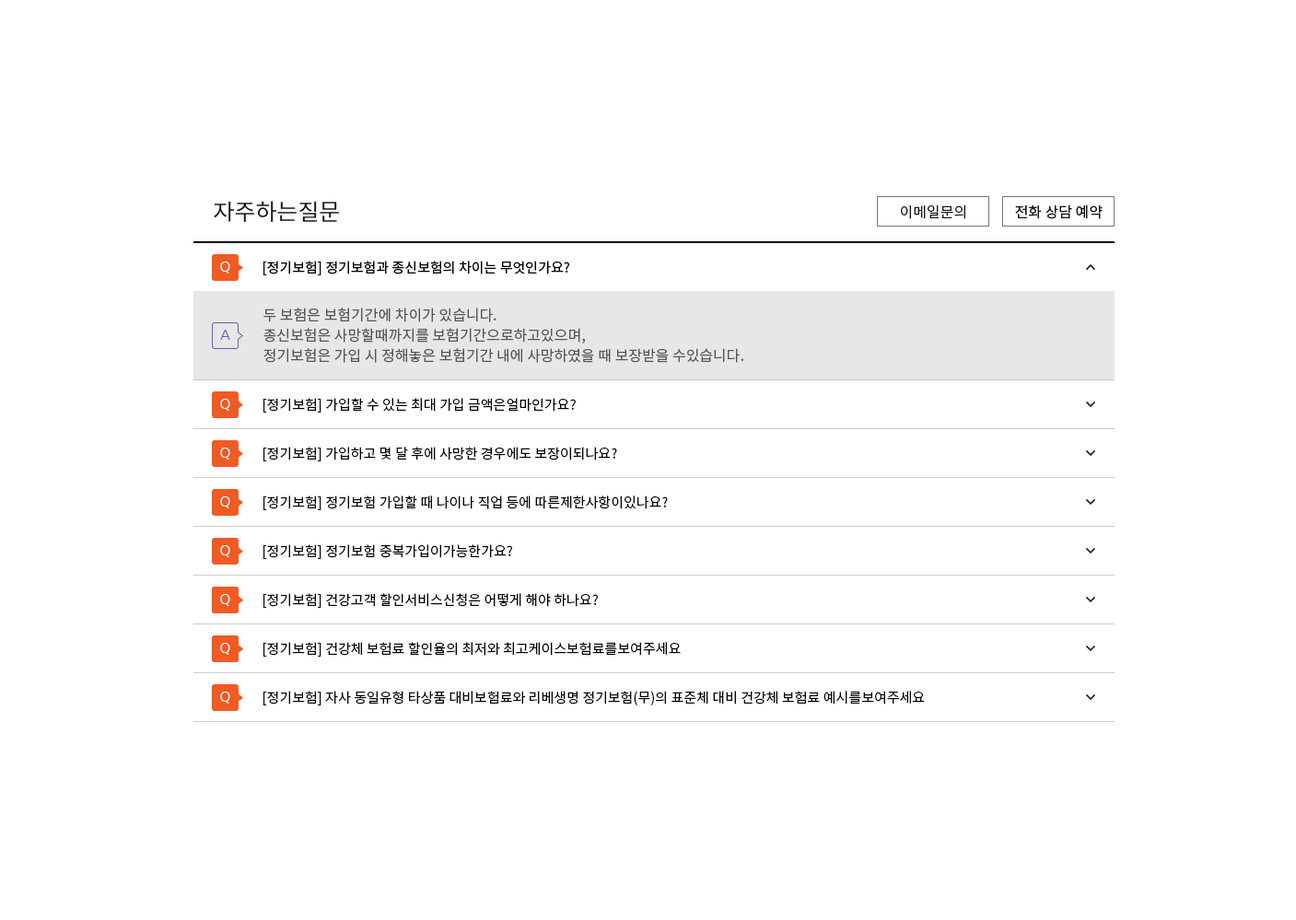
<style>
.page{position:relative;width:1296px;height:920px;background:#ffffff}
.page>*{position:absolute;margin:0}
.t1{font:23px "NotoSansKR-Regular";color:#121314}
.t2{font:14.7px "NotoSansKR-Regular";color:#121314}
.t3{font:13.8px "NanumGothic";color:#ffffff;text-transform:uppercase}
.t4{font:13.8px "NotoSansKR-Regular";color:#000000}
.t5{font:14.7px/20.3px "NotoSansKR-Regular";color:#555555}
.t6{font:13.8px "NanumGothic";color:#6b5bba;text-transform:uppercase}
.t7{font:13.8px/48.8px "NotoSansKR-Regular";color:#000000}
</style>
<div class="page">
<p class="t1" style="left:214px;top:201px;width:125px;height:21px">자주하는질문</p>
<p class="t2" style="left:901px;top:204px;width:64px;height:15px">이메일문의</p>
<p class="t2" style="left:1015px;top:204px;width:88px;height:15px">전화 상담 예약</p>
<p class="t3" style="left:220px;top:262px;width:10px;height:12px">q</p>
<p class="t4" style="left:263px;top:261px;width:306px;height:14px">[정기보험] 정기보험과 종신보험의 차이는 무엇인가요?</p>
<p class="t5" style="left:263px;top:308px;width:480px;height:55px">두 보험은 보험기간에 차이가 있습니다.<br>종신보험은 사망할때까지를 보험기간으로하고있으며,<br>정기보험은 가입 시 정해놓은 보험기간 내에 사망하였을 때 보장받을 수있습니다.</p>
<p class="t6" style="left:220px;top:330px;width:10px;height:10px">A</p>
<p class="t7" style="left:263px;top:398px;width:662px;height:308px">[정기보험] 가입할 수 있는 최대 가입 금액은얼마인가요?<br>[정기보험] 가입하고 몇 달 후에 사망한 경우에도 보장이되나요?<br>[정기보험] 정기보험 가입할 때 나이나 직업 등에 따른제한사항이있나요?<br>[정기보험] 정기보험 중복가입이가능한가요?<br>[정기보험] 건강고객 할인서비스신청은 어떻게 해야 하나요?       <br>[정기보험] 건강체 보험료 할인율의 최저와 최고케이스보험료를보여주세요<br>[정기보험] 자사 동일유형 타상품 대비보험료와 리베생명 정기보험(무)의 표준체 대비 건강체 보험료 예시를보여주세요</p>
</div>
